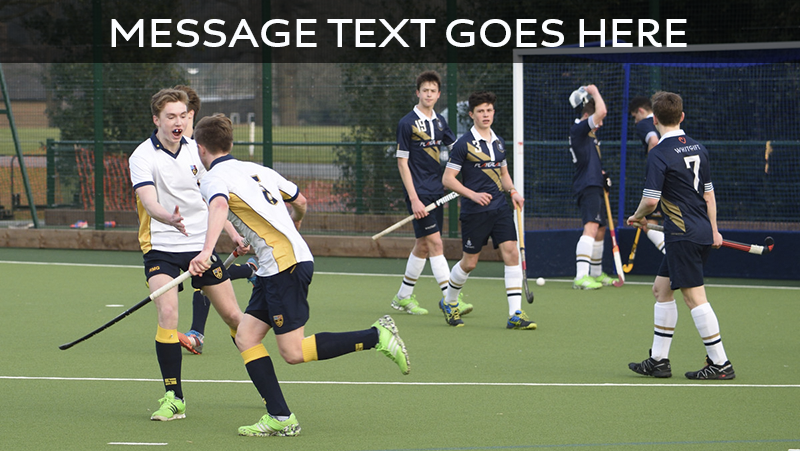
<style>
.page{position:relative;width:800px;height:451px}
.page>*{position:absolute;margin:0}
.t1{font:41.7px "Aspect2-Bold";color:#fbfdff}
</style>
<div class="page">
<p class="t1" style="left:111px;top:19px;width:576px;height:28px">MESSAGE TEXT GOES HERE</p>
</div>
